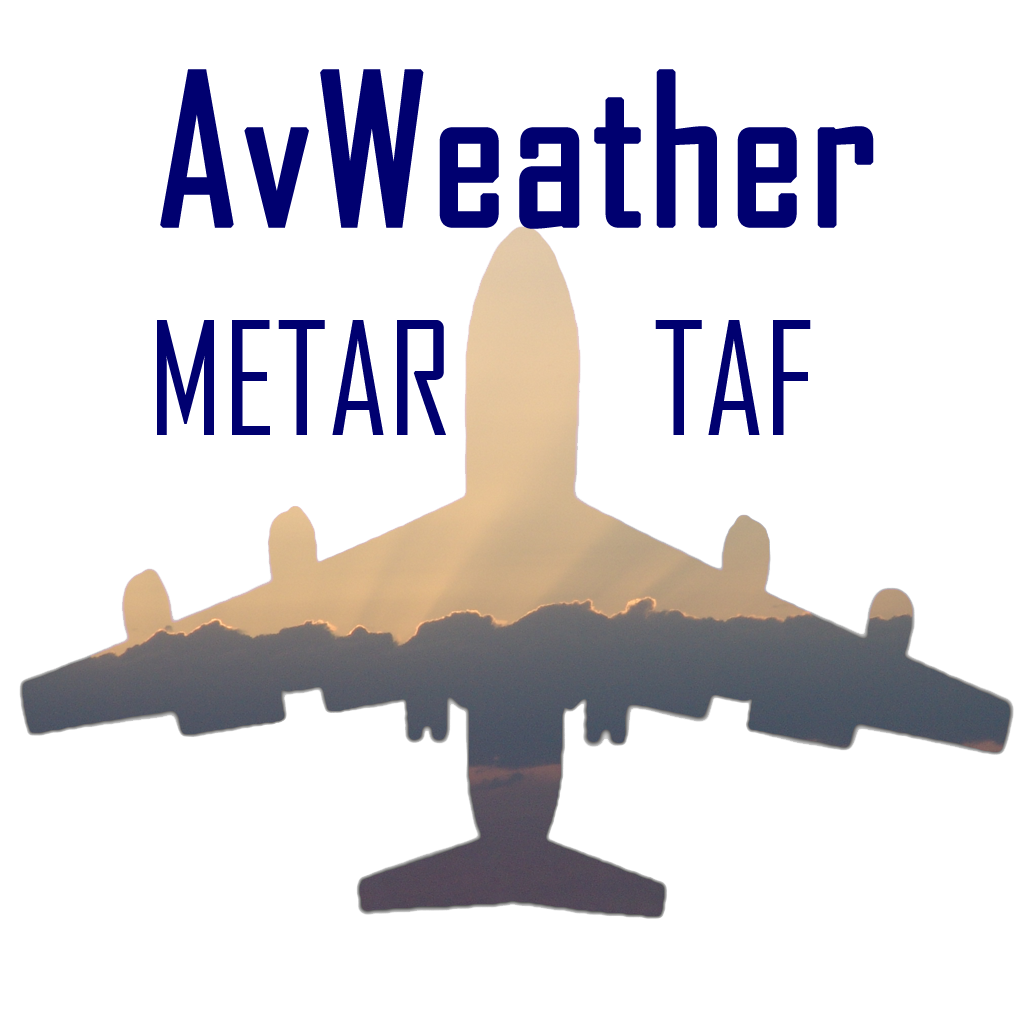
<style>
.page{position:relative;width:1024px;height:1024px;background:#ffffff}
.page>*{position:absolute;margin:0}
.t1{font:200px "AgencyFB-Reg";color:#000070;font-weight:bold}
.t2{font:150px "AgencyFB-Reg";color:#000070}
</style>
<div class="page">
<p class="t1" style="left:160px;top:69px;width:714px;height:160px">AvWeather</p>
<p class="t2" style="left:157px;top:320px;width:289px;height:115px">METAR</p>
<p class="t2" style="left:655px;top:320px;width:156px;height:115px">TAF</p>
</div>
